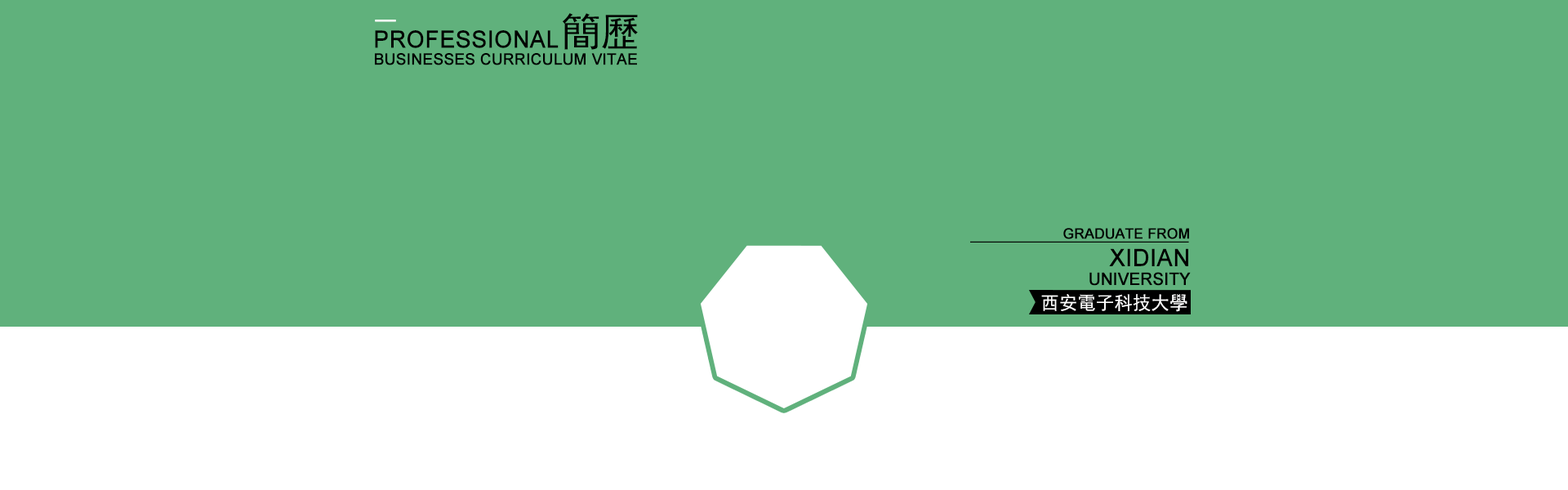
<style>
.page{position:relative;width:1568px;height:490px;background:#60b17c}
.page>*{position:absolute;margin:0}
.t1{font:39.5px "SimHei";color:#000000}
.t2{font:31.1px "SimHei";color:#ffffff;scale:1.49 1}
.t3{font:23.7px "ArialMT";color:#000000;font-weight:bold;scale:0.97 1}
.t4{font:15.6px "ArialMT";color:#000000;font-weight:bold}
.t5{font:14.1px "ArialMT";color:#000000;font-weight:bold}
.t6{font:23.6px "ArialMT";color:#000000;font-weight:bold}
.t7{font:16.8px "ArialMT";color:#000000;font-weight:bold;scale:0.97 1}
.t8{font:18.6px "SimHei";color:#ffffff}
</style>
<div class="page">
<p class="t1" style="left:562px;top:13px;width:76px;height:37px">簡歷</p>
<p class="t2" style="left:375px;top:20px;width:21px;height:2px">-</p>
<p class="t3" style="left:375px;top:30px;width:184px;height:18px">PROFESSIONAL</p>
<p class="t4" style="left:375px;top:53px;width:262px;height:12px">BUSINESSES CURRICULUM VITAE</p>
<p class="t5" style="left:1063px;top:228px;width:126px;height:11px">GRADUATE FROM</p>
<p class="t6" style="left:1109px;top:248px;width:79px;height:18px">XIDIAN</p>
<p class="t7" style="left:1089px;top:272px;width:102px;height:14px">UNIVERSITY</p>
<p class="t8" style="left:1041px;top:294px;width:146px;height:18px">西安電子科技大學</p>
</div>
